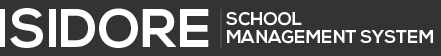
<style>
.page{position:relative;width:441px;height:56px;background:#333333}
.page>*{position:absolute;margin:0}
.t1{font:54px "NexaBold";color:#ffffff}
.t2{font:18px/18px "NexaBold";color:#ffffff}
</style>
<div class="page">
<p class="t1" style="left:0px;top:8px;width:209px;height:40px">ISIDORE</p>
<p class="t2" style="left:226px;top:12px;width:207px;height:32px">SCHOOL <br>MANAGEMENT SYSTEM</p>
</div>
